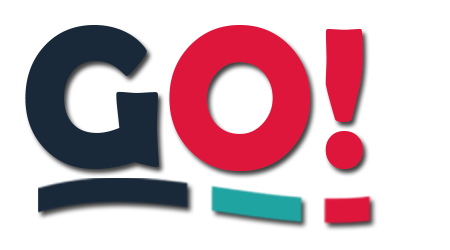
<style>
.page{position:relative;width:450px;height:250px;background:#ffffff}
.page>*{position:absolute;margin:0}
.t1{font:202px "BerlinSansFBDemi-Bold";color:#df163c}
.t2{font:202px "BerlinSansFBDemi-Bold";color:#1a293a}
</style>
<div class="page">
<p class="t1" style="left:25px;top:25px;width:338px;height:146px"><span class="t2">G</span>O!</p>
</div>
